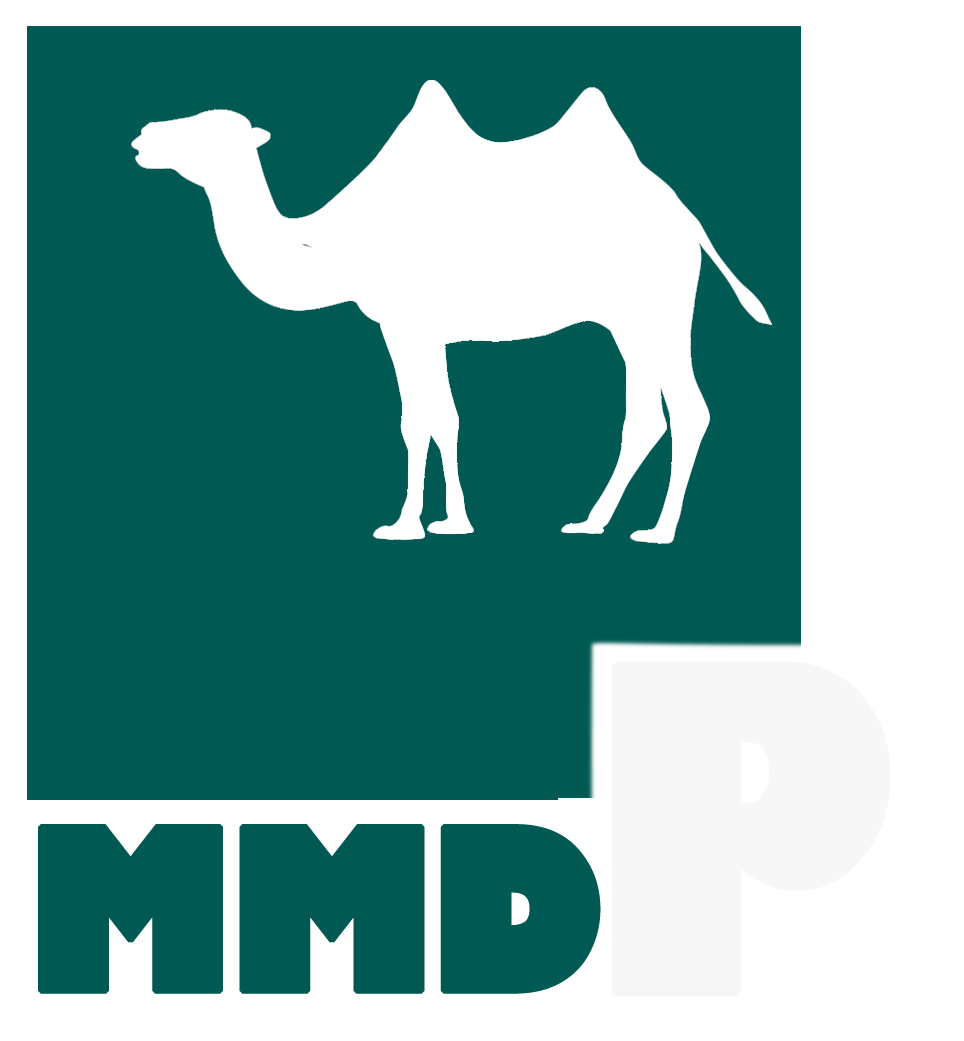
<style>
.page{position:relative;width:964px;height:1041px;background:#005952}
.page>*{position:absolute;margin:0}
.t1{font:746.7px "GillSans-UltraBold";letter-spacing:-0.05em;color:#f7f7f7;font-weight:bold;scale:0.82 1}
.t2{font:376.9px "GillSans-UltraBold";letter-spacing:-0.05em;color:#005952;font-weight:bold;scale:0.9 1}
</style>
<div class="page">
<p class="t1" style="left:612px;top:661px;width:279px;height:336px">P</p>
<p class="t2" style="left:38px;top:824px;width:563px;height:170px">MMD</p>
</div>
